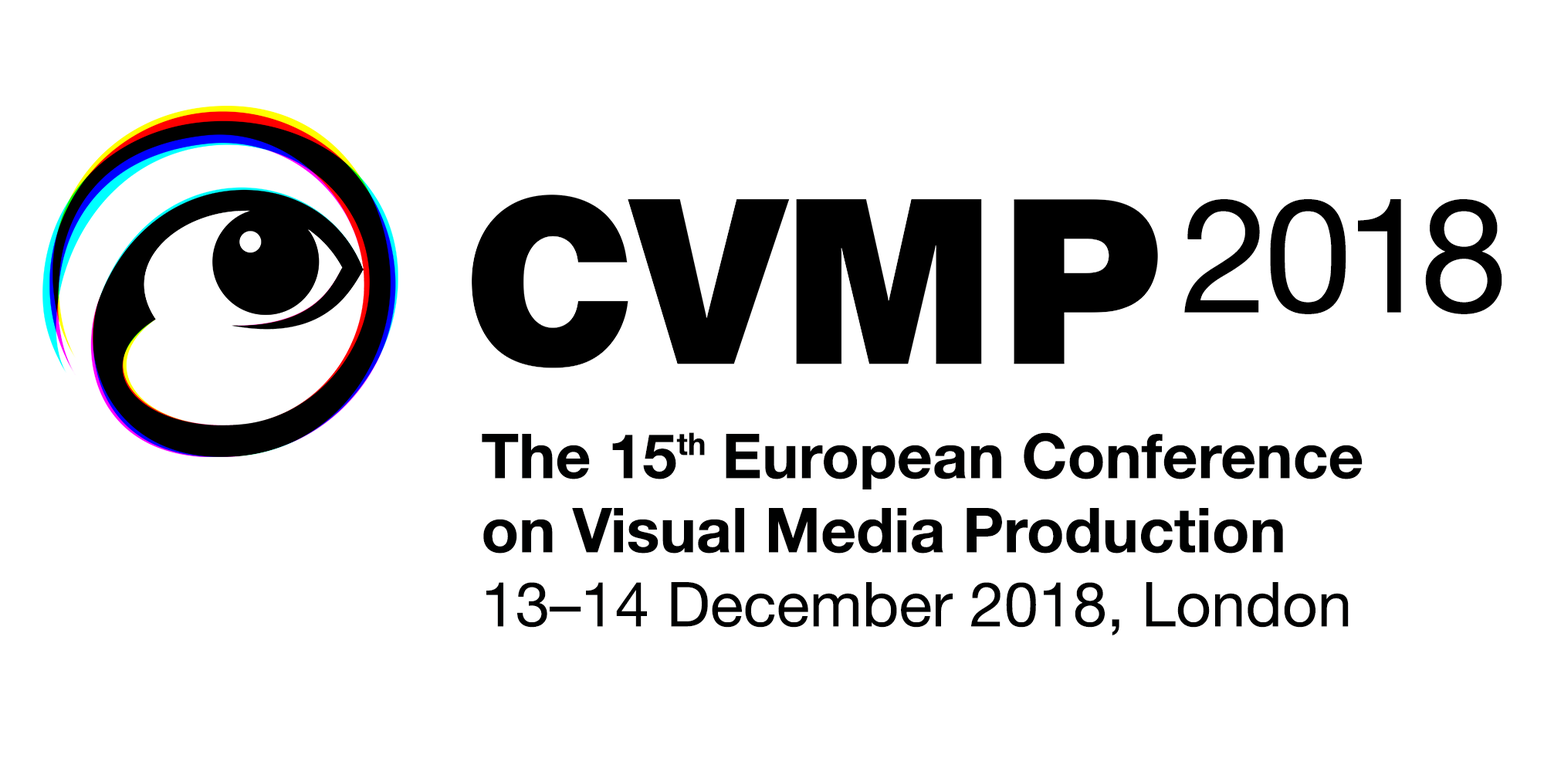
<style>
.page{position:relative;width:1544px;height:772px;background:#ffffff}
.page>*{position:absolute;margin:0}
.t1{font:233.3px "HelveticaBQ-Black";letter-spacing:-0.02em;color:#000000;scale:0.95 1}
.t2{font:159.6px "HelveticaNeue";color:#000000}
.t3{font:61.8px "HelveticaNeue-Bold";color:#000000}
.t4{font:30.9px "HelveticaNeue-Bold";color:#000000}
.t5{font:61.8px "HelveticaNeue";color:#000000}
</style>
<div class="page">
<p class="t1" style="left:472px;top:195px;width:686px;height:173px">CVMP</p>
<p class="t2" style="left:1184px;top:199px;width:319px;height:115px">2018</p>
<p class="t3" style="left:482px;top:432px;width:881px;height:203px">The 15<span class="t4">th </span>European Conference on Visual Media Production<br><span class="t5">13–14 December 2018, London</span></p>
</div>
